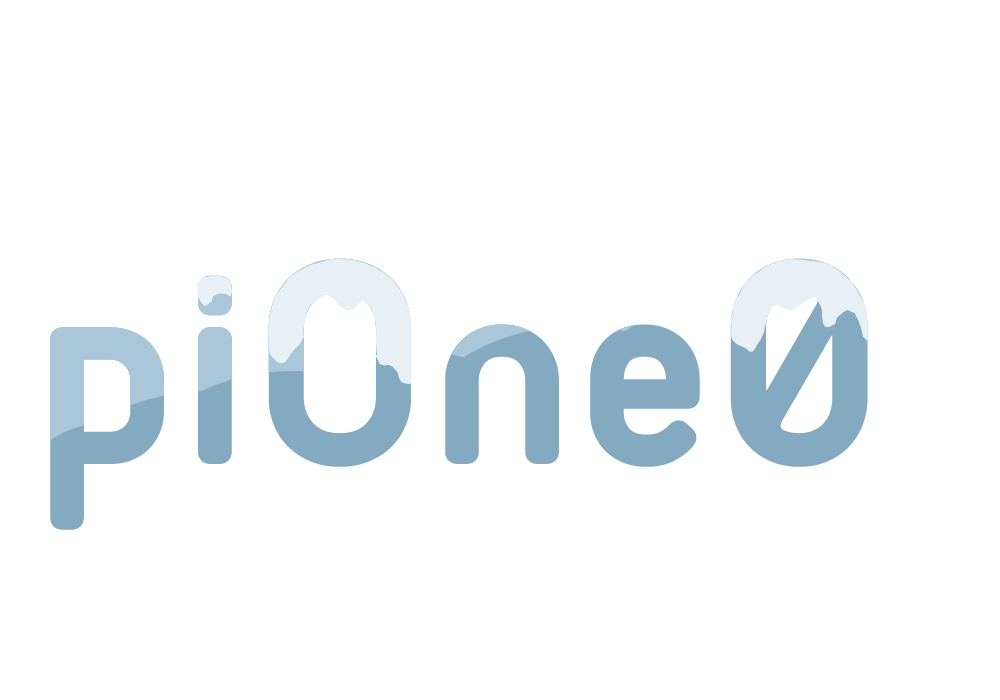
<style>
.page{position:relative;width:1000px;height:700px;background:#ffffff}
.page>*{position:absolute;margin:0}
.t1{font:286px "SciFly-Sans";color:#84aac2;font-weight:bold}
</style>
<div class="page">
<p class="t1" style="left:50px;top:258px;width:818px;height:272px">piOne0</p>
</div>
